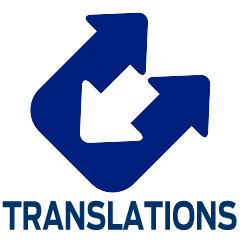
<style>
.page{position:relative;width:242px;height:242px;background:#ffffff}
.page>*{position:absolute;margin:0}
.t1{font:38px "Antenna-Bold";color:#003366;scale:0.71 1}
</style>
<div class="page">
<p class="t1" style="left:2px;top:200px;width:235px;height:31px">TRANSLATIONS</p>
</div>
